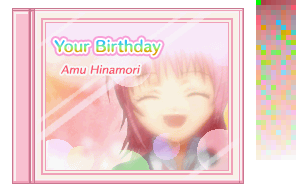
<style>
.page{position:relative;width:296px;height:192px}
.page>*{position:absolute;margin:0}
.t1{font:14px "HummingStd-B";letter-spacing:0.02em}
.t2{font:10px "HummingStd-D";letter-spacing:0.02em;color:#f85870;font-style:italic}
</style>
<div class="page">
<p class="t1" style="left:54px;top:39px;width:107px;height:17px">Your Birthday</p>
<p class="t2" style="left:61px;top:65px;width:80px;height:9px">Amu Hinamori</p>
</div>
